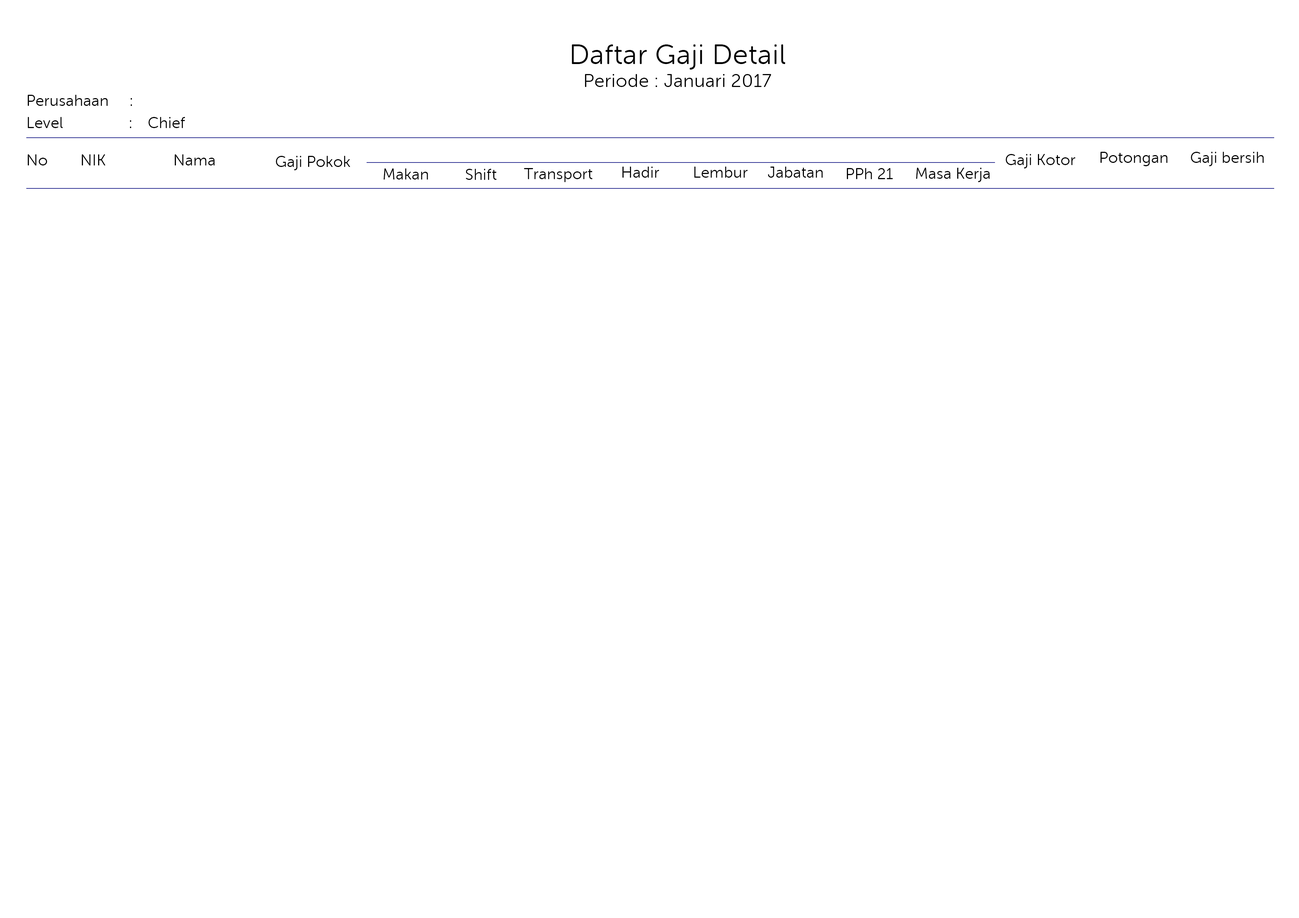
<style>
.page{position:relative;width:1299px;height:918px;background:#ffffff}
.page>*{position:absolute;margin:0}
.t1{font:27.8px "MuseoSansRounded-300";letter-spacing:0.02em;color:#000000}
.t2{font:18.5px "MuseoSansRounded-300";letter-spacing:0.02em;color:#000000}
.t3{font:15.4px "MuseoSansRounded-300";letter-spacing:0.02em;color:#000000}
</style>
<div class="page">
<p class="t1" style="left:572px;top:44px;width:213px;height:26px">Daftar Gaji Detail</p>
<p class="t2" style="left:585px;top:74px;width:186px;height:13px">Periode : Januari 2017</p>
<p class="t3" style="left:28px;top:95px;width:104px;height:11px">:     Perusahaan</p>
<p class="t3" style="left:28px;top:117px;width:103px;height:11px">:                Level</p>
<p class="t3" style="left:148px;top:117px;width:37px;height:11px">Chief</p>
<p class="t3" style="left:28px;top:154px;width:19px;height:11px">No</p>
<p class="t3" style="left:82px;top:154px;width:24px;height:11px">NIK</p>
<p class="t3" style="left:175px;top:154px;width:40px;height:11px">Nama</p>
<p class="t3" style="left:276px;top:156px;width:74px;height:14px">Gaji Pokok</p>
<p class="t3" style="left:1006px;top:154px;width:69px;height:14px">Gaji Kotor</p>
<p class="t3" style="left:1100px;top:152px;width:67px;height:14px">Potongan</p>
<p class="t3" style="left:1191px;top:152px;width:73px;height:14px">Gaji bersih</p>
<p class="t3" style="left:384px;top:168px;width:44px;height:12px">Makan</p>
<p class="t3" style="left:466px;top:169px;width:30px;height:11px">Shift</p>
<p class="t3" style="left:524px;top:168px;width:68px;height:14px">Transport</p>
<p class="t3" style="left:622px;top:167px;width:37px;height:11px">Hadir</p>
<p class="t3" style="left:694px;top:167px;width:53px;height:11px">Lembur</p>
<p class="t3" style="left:768px;top:167px;width:55px;height:11px">Jabatan</p>
<p class="t3" style="left:847px;top:168px;width:46px;height:11px">PPh 21</p>
<p class="t3" style="left:916px;top:168px;width:74px;height:14px">Masa Kerja</p>
</div>
